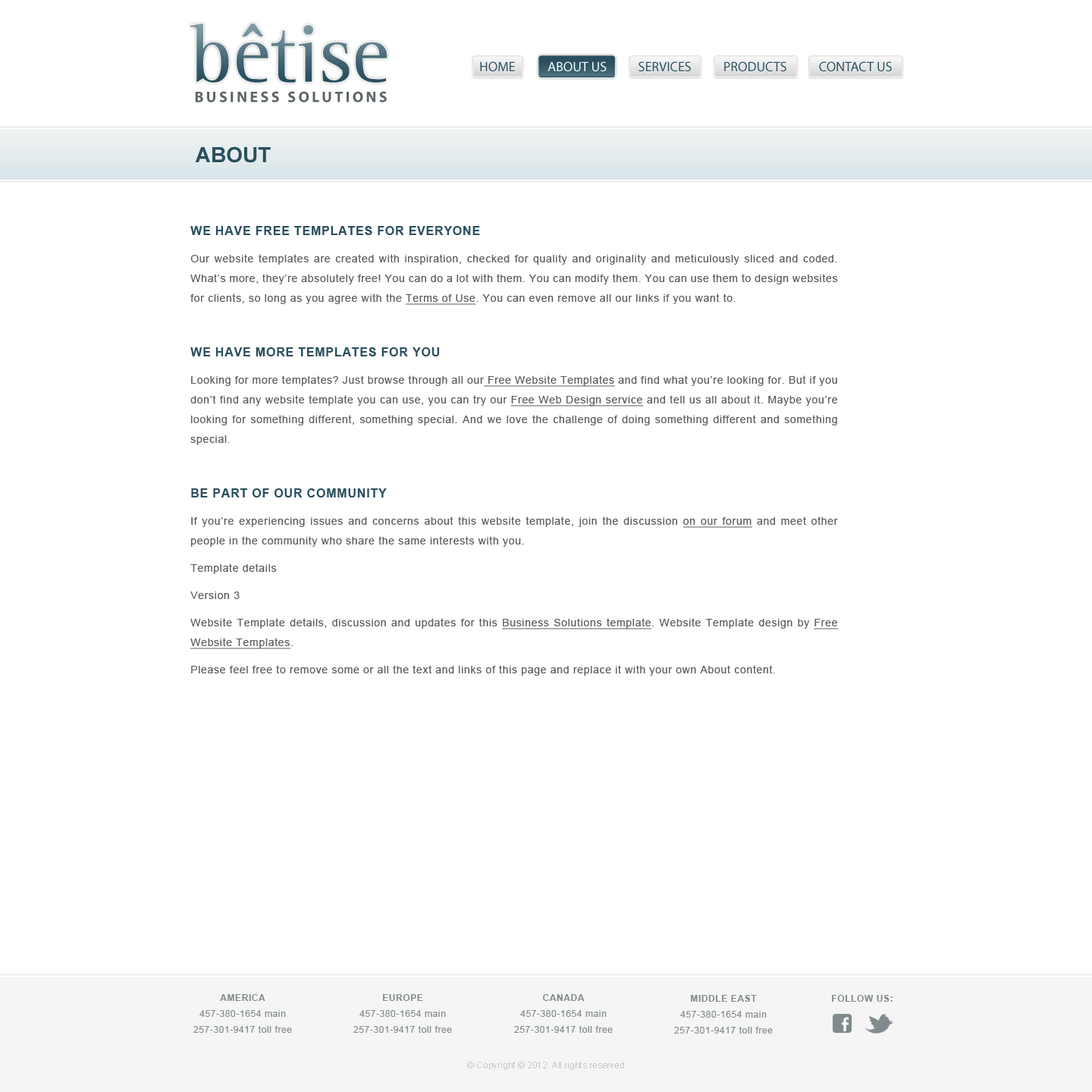
<style>
.page{position:relative;width:1092px;height:1092px;background:#ffffff}
.page>*{position:absolute;margin:0}
.t1{font:83.4px "LeftistMonoSerif"}
.t2{font:13.6px "MyriadPro-Regular";color:#2a4f5e}
.t3{font:13.6px "MyriadPro-Regular";color:#ffffff}
.t4{font:15.2px "MyriadPro-Bold";letter-spacing:0.17em;color:#5d6568;text-transform:uppercase}
.t5{font:21.2px "Arial-BoldMT";color:#2a4f5e;text-transform:uppercase}
.t6{font:10.6px/19.7px "ArialMT";letter-spacing:0.05em;color:#5d5d5d}
.t7{font:12.1px/19.7px "Arial-BoldMT";letter-spacing:0.05em;color:#2a4f5e;text-transform:uppercase}
.t8{font:10.6px/19.7px "ArialMT";letter-spacing:0.05em;color:#5d5d5d;text-decoration:underline}
.t9{font:9.1px/15.9px "ArialMT";letter-spacing:0.05em;color:#818a8c}
.t10{font:9.1px/15.9px "Arial-BoldMT";letter-spacing:0.05em;color:#818a8c;text-transform:uppercase}
.t11{font:9.1px "Arial-BoldMT";letter-spacing:0.05em;color:#818a8c;text-transform:uppercase}
.t12{font:9.1px "ArialMT";color:#c1c1c1}
</style>
<div class="page">
<p class="t1" style="left:190px;top:24px;width:198px;height:59px">bêtise</p>
<p class="t2" style="left:480px;top:61px;width:412px;height:11px">HOME           ABOUT US           SERVICES           PRODUCTS           CONTACT US</p>
<p class="t3" style="left:548px;top:61px;width:59px;height:11px">ABOUT US</p>
<p class="t4" style="left:195px;top:91px;width:192px;height:11px">Business Solutions</p>
<p class="t5" style="left:195px;top:146px;width:76px;height:17px">About</p>
<p class="t6" style="left:190px;top:226px;width:649px;height:450px;text-align:justify"><span class="t7">We Have Free Templates for Everyone<br></span>Our website templates are created with inspiration, checked for quality and originality and meticulously sliced and coded. What’s more, they’re absolutely free! You can do a lot with them. You can modify them. You can use them to design websites for clients, so long as you agree with the <span class="t8">Terms of Use</span>. You can even remove all our links if you want to.<br><br><span class="t7">We Have More Templates for You<br></span>Looking for more templates? Just browse through all our<span class="t8"> Free Website Templates</span> and find what you’re looking for. But if you don’t find any website template you can use, you can try our <span class="t8">Free Web Design service</span> and tell us all about it. Maybe you’re looking for something different, something special. And we love the challenge of doing something different and something special.<br><br><span class="t7">Be Part of Our Community<br></span>If you’re experiencing issues and concerns about this website template, join the discussion <span class="t8">on our forum</span> and meet other people in the community who share the same interests with you.<br>Template details<br>Version 3<br>Website Template details, discussion and updates for this <span class="t8">Business Solutions template</span>. Website Template design by <span class="t8">Free Website Templates</span>.<br>Please feel free to remove some or all the text and links of this page and replace it with your own About content.</p>
<p class="t9" style="left:193px;top:994px;width:99px;height:39px;text-align:center"><span class="t10">America<br></span>457-380-1654 main<br>257-301-9417 toll free</p>
<p class="t9" style="left:353px;top:994px;width:99px;height:39px;text-align:center"><span class="t10">Europe<br></span>457-380-1654 main<br>257-301-9417 toll free</p>
<p class="t9" style="left:514px;top:994px;width:99px;height:39px;text-align:center"><span class="t10">Canada<br></span>457-380-1654 main<br>257-301-9417 toll free</p>
<p class="t9" style="left:674px;top:995px;width:99px;height:39px;text-align:center"><span class="t10">Middle East<br></span>457-380-1654 main<br>257-301-9417 toll free</p>
<p class="t11" style="left:832px;top:995px;width:61px;height:7px">Follow us:</p>
<p class="t12" style="left:467px;top:1062px;width:157px;height:8px">© Copyright © 2012. All rights reserved</p>
</div>
